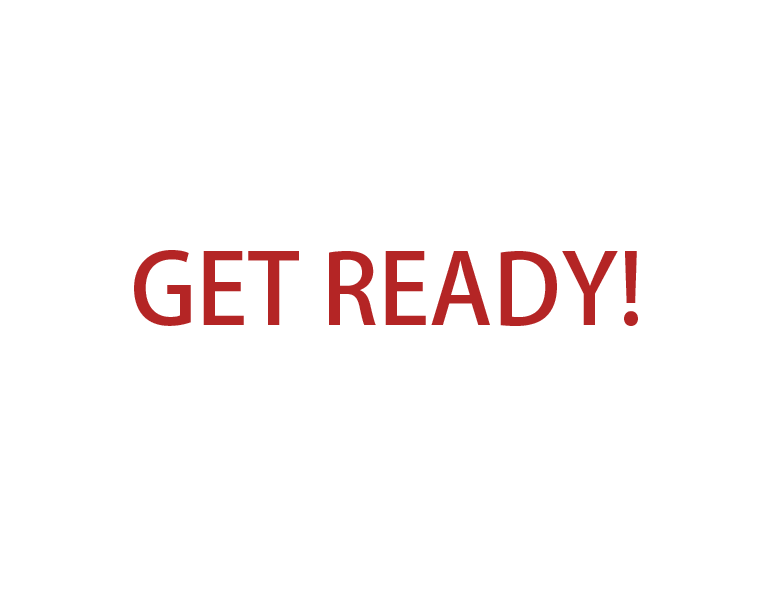
<style>
.page{position:relative;width:780px;height:600px;background:#ffffff}
.page>*{position:absolute;margin:0}
.t1{font:96px "AdobeHeitiStd-Regular";color:#b42525}
</style>
<div class="page">
<p class="t1" style="left:134px;top:250px;width:504px;height:76px">GET READY!</p>
</div>
